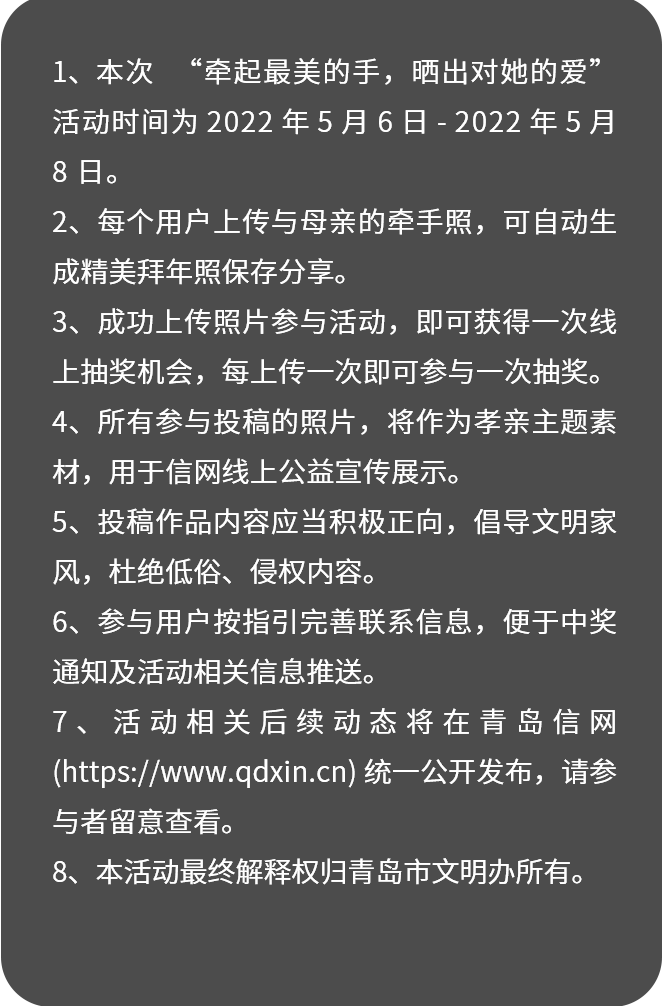
<style>
.page{position:relative;width:663px;height:1006px;background:#4c4c4c}
.page>*{position:absolute;margin:0}
.t1{font:28px/50px "SourceHanSansCN-Normal";color:#ffffff}
.t2{font:28px/50px "SourceHanSansCN-Normal";letter-spacing:0.05em;color:#ffffff}
</style>
<div class="page">
<p class="t1" style="left:52px;top:58px;width:565px;height:827px;text-align:justify">1、<span class="t2">本次 “牵起最美的手，晒出对她的爱” 活动时间为 2022 年 5 月 6 日 - 2022 年 5 月 8 日。<br></span>2、每个用户上传与母亲的牵手照，可自动生成精美拜年照保存分享。<br>3、成功上传照片参与活动，即可获得一次线上抽奖机会，每上传一次即可参与一次抽奖。<br>4、所有参与投稿的照片，将作为孝亲主题素材，用于信网线上公益宣传展示。<br>5、投稿作品内容应当积极正向，倡导文明家风，杜绝低俗、侵权内容。<br>6、参与用户按指引完善联系信息，便于中奖通知及活动相关信息推送。<br>7、活动相关后续动态将在青岛信网 (https://www.qdxin.cn) 统一公开发布，请参与者留意查看。<br>8、本活动最终解释权归青岛市文明办所有。</p>
</div>
